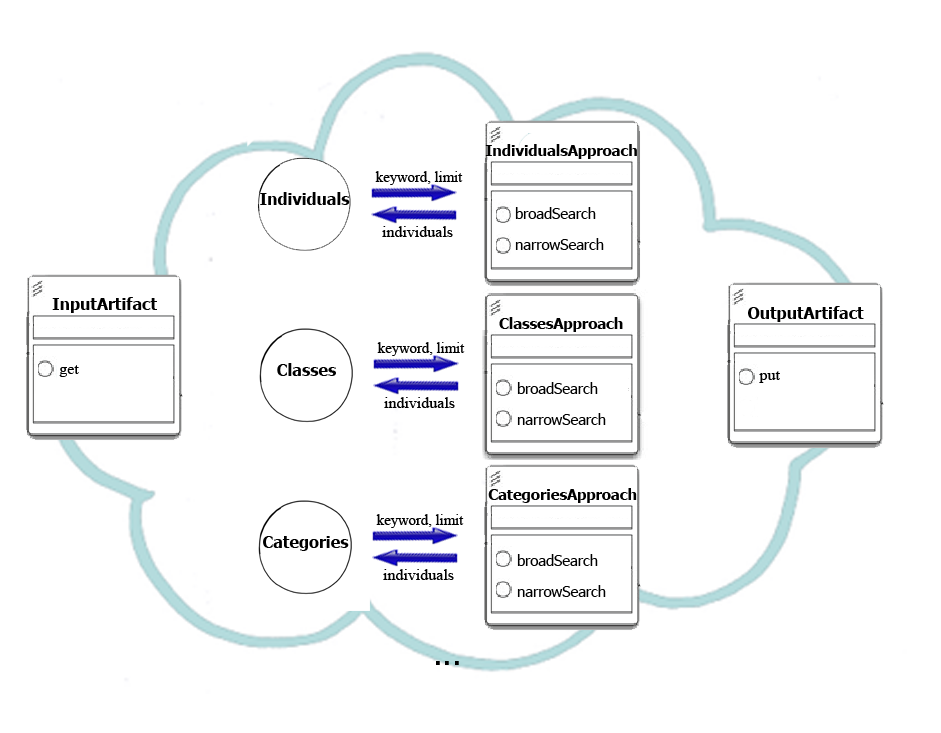
<style>
.page{position:relative;width:941px;height:733px;background:#ffffff}
.page>*{position:absolute;margin:0}
.t1{font:14.7px "Tahoma-Bold";color:#000000}
.t2{font:14.7px "TimesNewRomanPSMT";color:#000000}
.t3{font:16px "Tahoma-Bold";color:#000000}
.t4{font:14.7px "Tahoma";color:#000000}
.t5{font:16px "TimesNewRomanPSMT";color:#000000}
.t6{font:32px "Tahoma";color:#000000}
</style>
<div class="page">
<p class="t1" style="left:485px;top:144px;width:152px;height:15px">IndividualsApproach</p>
<p class="t2" style="left:375px;top:171px;width:88px;height:14px">keyword, limit</p>
<p class="t3" style="left:260px;top:192px;width:90px;height:13px">Individuals</p>
<p class="t4" style="left:515px;top:207px;width:89px;height:43px">broadSearch<br><br>narrowSearch</p>
<p class="t5" style="left:382px;top:226px;width:71px;height:11px">individuals</p>
<p class="t3" style="left:52px;top:297px;width:105px;height:16px">InputArtifact</p>
<p class="t1" style="left:499px;top:317px;width:124px;height:15px">ClassesApproach</p>
<p class="t3" style="left:748px;top:306px;width:116px;height:16px">OutputArtifact</p>
<p class="t2" style="left:377px;top:342px;width:88px;height:14px">keyword, limit</p>
<p class="t5" style="left:59px;top:365px;width:20px;height:12px">get</p>
<p class="t3" style="left:277px;top:363px;width:59px;height:13px">Classes</p>
<p class="t5" style="left:759px;top:371px;width:21px;height:12px">put</p>
<p class="t4" style="left:517px;top:382px;width:89px;height:43px">broadSearch<br><br>narrowSearch</p>
<p class="t5" style="left:384px;top:397px;width:71px;height:11px">individuals</p>
<p class="t1" style="left:488px;top:488px;width:149px;height:15px">CategoriesApproach</p>
<p class="t2" style="left:376px;top:514px;width:88px;height:14px">keyword, limit</p>
<p class="t3" style="left:263px;top:536px;width:86px;height:15px">Categories</p>
<p class="t4" style="left:517px;top:554px;width:89px;height:43px">broadSearch<br><br>narrowSearch</p>
<p class="t5" style="left:383px;top:569px;width:71px;height:11px">individuals</p>
<p class="t6" style="left:436px;top:661px;width:23px;height:4px">...</p>
</div>
